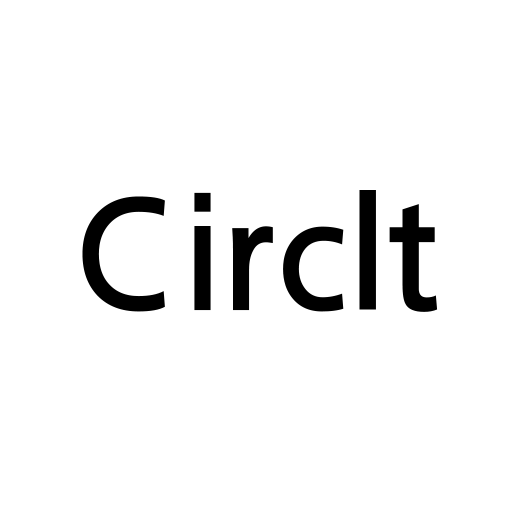
<style>
.page{position:relative;width:512px;height:512px;background:#ffffff}
.page>*{position:absolute;margin:0}
.t1{font:150px "JejuGothic";color:#000000}
</style>
<div class="page">
<p class="t1" style="left:82px;top:190px;width:356px;height:122px">Circlt</p>
</div>
